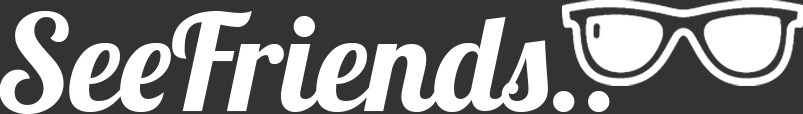
<style>
.page{position:relative;width:803px;height:114px;background:#333333}
.page>*{position:absolute;margin:0}
.t1{font:133.3px "Lobster-Regular";color:#ffffff}
</style>
<div class="page">
<p class="t1" style="left:0px;top:11px;width:610px;height:103px">SeeFriends..</p>
</div>
